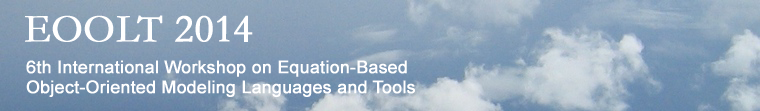
<style>
.page{position:relative;width:760px;height:111px}
.page>*{position:absolute;margin:0}
.t1{font:39.9px "Garamond";color:#ffffff;font-weight:bold}
.t2{font:17.4px "ArialMT";color:#ffffff;font-weight:bold}
</style>
<div class="page">
<p class="t1" style="left:25px;top:15px;width:228px;height:27px">EOOLT 2014</p>
<p class="t2" style="left:26px;top:60px;width:381px;height:17px">6th International Workshop on Equation-Based</p>
<p class="t2" style="left:26px;top:80px;width:389px;height:17px">Object-Oriented Modeling Languages and Tools</p>
</div>
